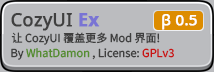
<style>
.page{position:relative;width:214px;height:72px;background:#bbbcbf}
.page>*{position:absolute;margin:0}
.t1{font:18px "NotoSans-Regular";color:#3f3f3f;font-weight:bold}
.t2{font:18px "NotoSans-Bold";color:#7974d4;font-weight:bold}
.t3{font:15px "NotoSans-Regular";color:#ffffff;font-weight:bold}
.t4{font:11px "NotoSansSC-Regular";color:#3f3f3f;font-weight:bold}
.t5{font:11px "NotoSansSC-Regular";color:#558d30;font-weight:bold}
.t6{font:11px "NotoSansSC-Regular";color:#c81414;font-weight:bold}
</style>
<div class="page">
<p class="t1" style="left:11px;top:13px;width:89px;height:18px">CozyUI <span class="t2">Ex</span></p>
<p class="t3" style="left:162px;top:14px;width:35px;height:16px">β 0.5</p>
<p class="t4" style="left:11px;top:32px;width:149px;height:13px">让 CozyUI 覆盖更多 Mod 界面!</p>
<p class="t4" style="left:11px;top:48px;width:163px;height:12px">By <span class="t5">WhatDamon</span> , License: <span class="t6">GPLv3</span></p>
</div>
